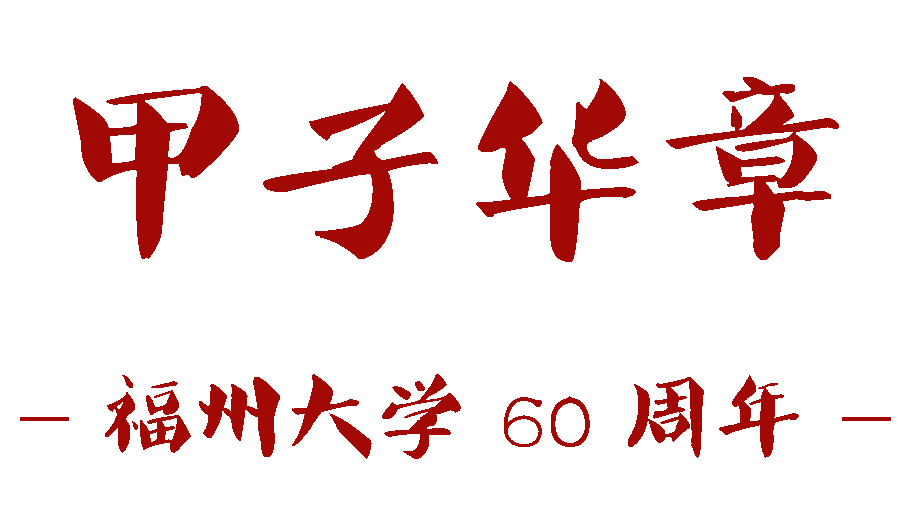
<style>
.page{position:relative;width:911px;height:513px;background:#ffffff}
.page>*{position:absolute;margin:0}
.t1{font:200px "-";color:#a30904}
.t2{font:91.7px "-";color:#a30904}
</style>
<div class="page">
<p class="t1" style="left:73px;top:77px;width:766px;height:185px">甲子华章</p>
<p class="t2" style="left:20px;top:374px;width:871px;height:85px">- 福州大学 60 周年 -</p>
</div>
